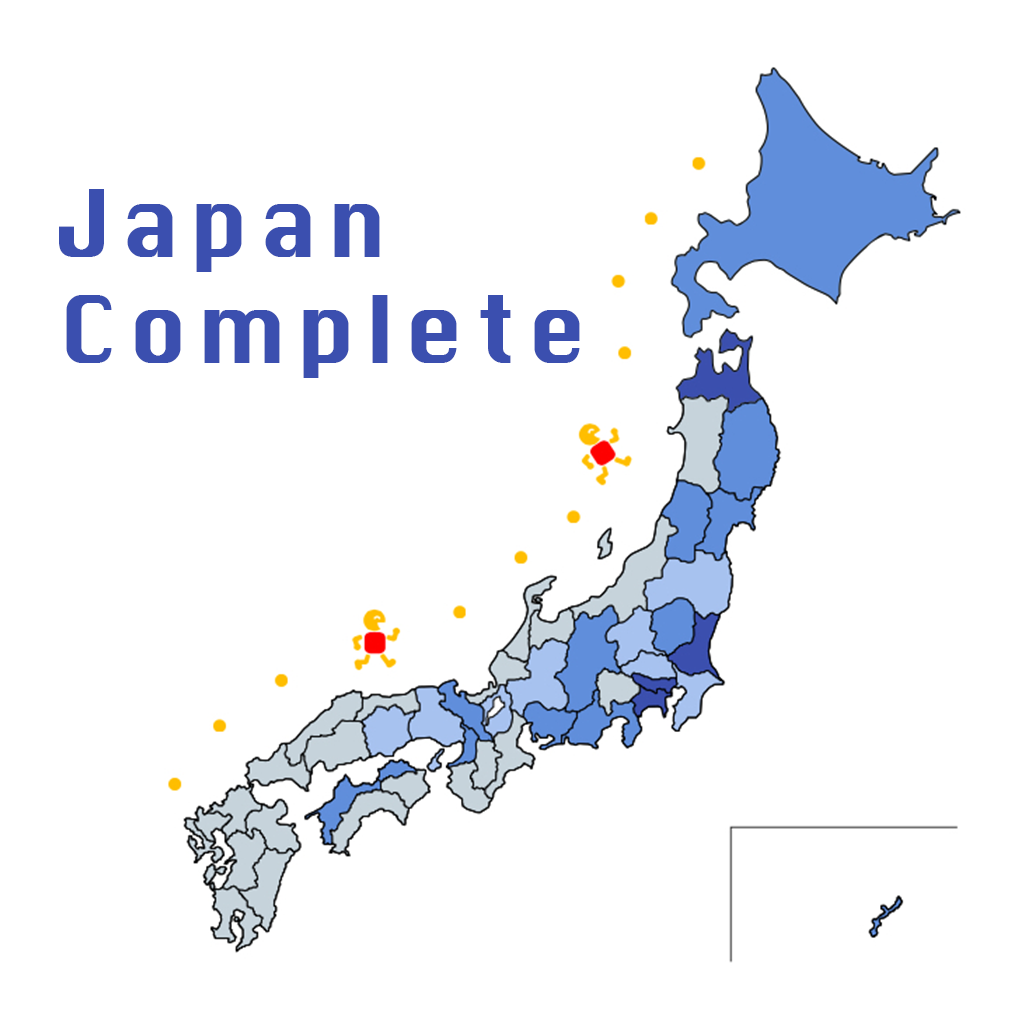
<style>
.page{position:relative;width:1024px;height:1024px;background:#ffffff}
.page>*{position:absolute;margin:0}
.t1{font:90px/53px "Krungthep";letter-spacing:0.1em;color:#3b4faf}
</style>
<div class="page">
<p class="t1" style="left:59px;top:189px;width:521px;height:189px">Japan<br><br>Complete</p>
</div>
